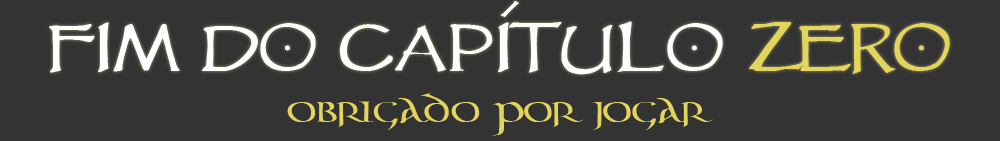
<style>
.page{position:relative;width:1000px;height:141px;background:#333333}
.page>*{position:absolute;margin:0}
.t1{font:67.8px "VTCGoblinHand";color:#ffffff}
.t2{font:67.8px "VTCGoblinHand";color:#e3d55b}
.t3{font:25.7px "AonCari-Regular";color:#e3d55b}
</style>
<div class="page">
<p class="t1" style="left:49px;top:21px;width:901px;height:54px">Fim do Capitulo <span class="t2">zero</span></p>
<p class="t3" style="left:287px;top:92px;width:426px;height:44px">Obrigado por jogar</p>
</div>
